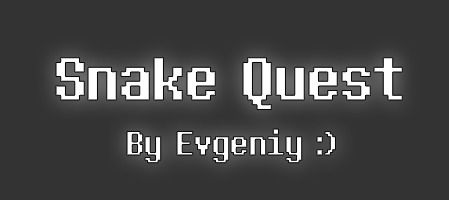
<style>
.page{position:relative;width:449px;height:200px;background:#333333}
.page>*{position:absolute;margin:0}
.t1{font:41.7px "Determination2";color:#ffffff}
.t2{font:75px "Determination2";color:#ffffff}
</style>
<div class="page">
<p class="t1" style="left:56px;top:57px;width:347px;height:106px"><span class="t2">Snake Quest<br>     </span>By Evgeniy :)</p>
</div>
